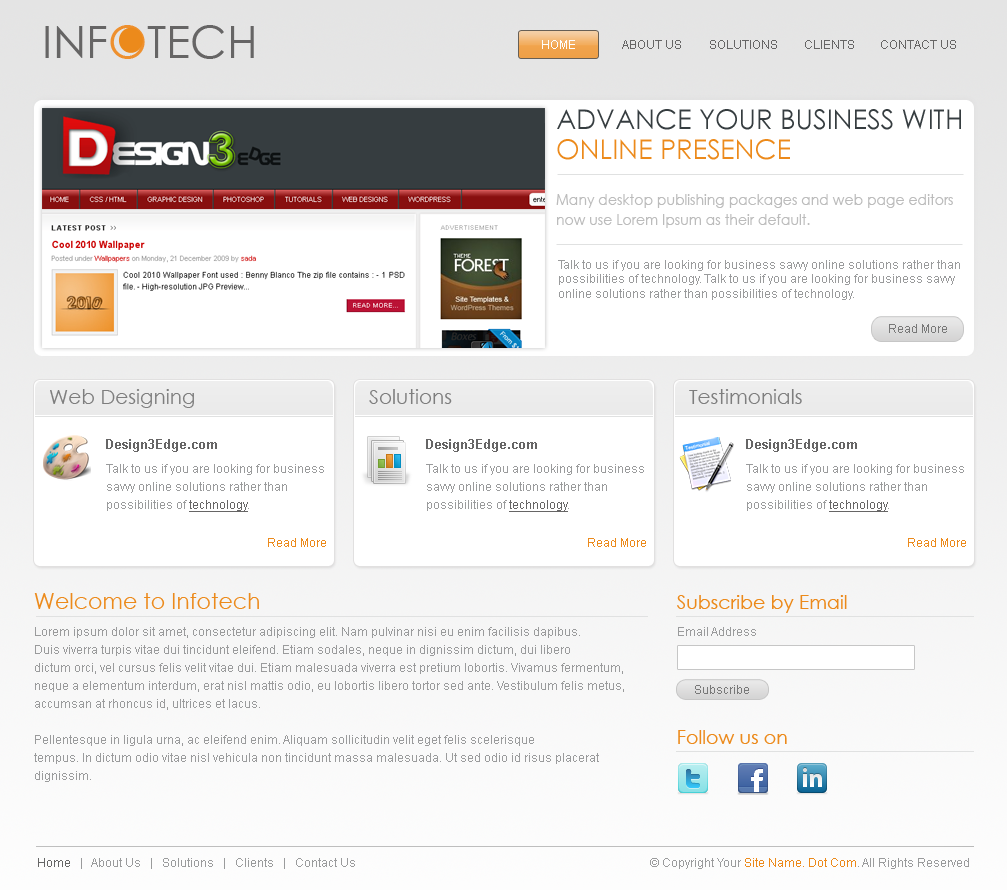
<style>
.page{position:relative;width:1007px;height:890px;background:#ffffff}
.page>*{position:absolute;margin:0}
.t1{font:45.1px "CenturyGothic";color:#666565}
.t2{font:45.1px "CenturyGothic";color:#ee902e}
.t3{font:12px "ArialMT";color:#fefefe}
.t4{font:12px "ArialMT";color:#666565}
.t5{font:27px/18px "CenturyGothic";color:#363d40}
.t6{font:27px/18px "CenturyGothic";color:#ec8a1b}
.t7{font:14.6px/20px "CenturyGothic";color:#bcbcbc;scale:0.96 1}
.t8{font:12px "ArialMT";color:#9a9b9c}
.t9{font:12px "ArialMT";color:#787878}
.t10{font:20px "CenturyGothic";color:#7e7e7e}
.t11{font:13px "Arial-BoldMT";color:#666565}
.t12{font:12px/18px "ArialMT";color:#9a9b9c}
.t13{font:12px/18px "ArialMT";color:#666565;text-decoration:underline}
.t14{font:12px "ArialMT";color:#ec8a1b}
.t15{font:22px "CenturyGothic";color:#ec8a1b}
.t16{font:19px "CenturyGothic";color:#ec8a1b}
.t17{font:12px "ArialMT";color:#666666}
</style>
<div class="page">
<p class="t1" style="left:45px;top:25px;width:209px;height:34px">INF<span class="t2">O</span>TECH</p>
<p class="t3" style="left:542px;top:40px;width:33px;height:9px">HOME</p>
<p class="t4" style="left:622px;top:40px;width:59px;height:9px">ABOUT US</p>
<p class="t4" style="left:710px;top:40px;width:67px;height:9px">SOLUTIONS</p>
<p class="t4" style="left:805px;top:40px;width:49px;height:9px">CLIENTS</p>
<p class="t4" style="left:881px;top:40px;width:75px;height:9px">CONTACT US</p>
<p class="t5" style="left:557px;top:109px;width:404px;height:51px">ADVANCE YOUR BUSINESS WITH <br><span class="t6">ONLINE PRESENCE</span></p>
<p class="t7" style="left:556px;top:194px;width:397px;height:34px">Many desktop publishing packages and web page editors <br>now use Lorem Ipsum as their default.</p>
<p class="t8" style="left:558px;top:260px;width:402px;height:40px">Talk to us if you are looking for business savvy online solutions rather than <br>possibilities of technology. Talk to us if you are looking for business savvy <br>online solutions rather than possibilities of technology.</p>
<p class="t9" style="left:889px;top:324px;width:58px;height:9px">Read More</p>
<p class="t10" style="left:50px;top:389px;width:144px;height:19px">Web Designing</p>
<p class="t10" style="left:369px;top:389px;width:83px;height:15px">Solutions</p>
<p class="t10" style="left:689px;top:389px;width:113px;height:15px">Testimonials</p>
<p class="t11" style="left:106px;top:439px;width:111px;height:13px">Design3Edge.com</p>
<p class="t11" style="left:426px;top:439px;width:111px;height:13px">Design3Edge.com</p>
<p class="t11" style="left:746px;top:439px;width:111px;height:13px">Design3Edge.com</p>
<p class="t12" style="left:106px;top:464px;width:218px;height:48px">Talk to us if you are looking for business <br>savvy online solutions rather than <br>possibilities of <span class="t13">technology</span>.</p>
<p class="t12" style="left:426px;top:464px;width:218px;height:48px">Talk to us if you are looking for business <br>savvy online solutions rather than <br>possibilities of <span class="t13">technology</span>.</p>
<p class="t12" style="left:746px;top:464px;width:218px;height:48px">Talk to us if you are looking for business <br>savvy online solutions rather than <br>possibilities of <span class="t13">technology</span>.</p>
<p class="t14" style="left:268px;top:538px;width:58px;height:9px">Read More</p>
<p class="t14" style="left:588px;top:538px;width:58px;height:9px">Read More</p>
<p class="t14" style="left:908px;top:538px;width:58px;height:9px">Read More</p>
<p class="t15" style="left:34px;top:593px;width:225px;height:16px">Welcome to Infotech</p>
<p class="t16" style="left:677px;top:595px;width:170px;height:18px">Subscribe by Email</p>
<p class="t12" style="left:34px;top:627px;width:590px;height:155px">Lorem ipsum dolor sit amet, consectetur adipiscing elit. Nam pulvinar nisi eu enim facilisis dapibus. <br>Duis viverra turpis vitae dui tincidunt eleifend. Etiam sodales, neque in dignissim dictum, dui libero <br>dictum orci, vel cursus felis velit vitae dui. Etiam malesuada viverra est pretium lobortis. Vivamus fermentum, <br>neque a elementum interdum, erat nisl mattis odio, eu lobortis libero tortor sed ante. Vestibulum felis metus, <br>accumsan at rhoncus id, ultrices et lacus. <br><br>Pellentesque in ligula urna, ac eleifend enim. Aliquam sollicitudin velit eget felis scelerisque <br>tempus. In dictum odio vitae nisl vehicula non tincidunt massa malesuada. Ut sed odio id risus placerat <br>dignissim.</p>
<p class="t8" style="left:678px;top:627px;width:78px;height:9px">Email Address</p>
<p class="t9" style="left:695px;top:685px;width:54px;height:9px">Subscribe</p>
<p class="t16" style="left:678px;top:730px;width:109px;height:14px">Follow us on</p>
<p class="t8" style="left:38px;top:858px;width:317px;height:11px"><span class="t17">Home</span>   |   About Us   |   Solutions   |   Clients   |   Contact Us</p>
<p class="t8" style="left:650px;top:858px;width:319px;height:11px">© Copyright Your <span class="t14">Site Name. Dot Com</span>. All Rights Reserved</p>
</div>
